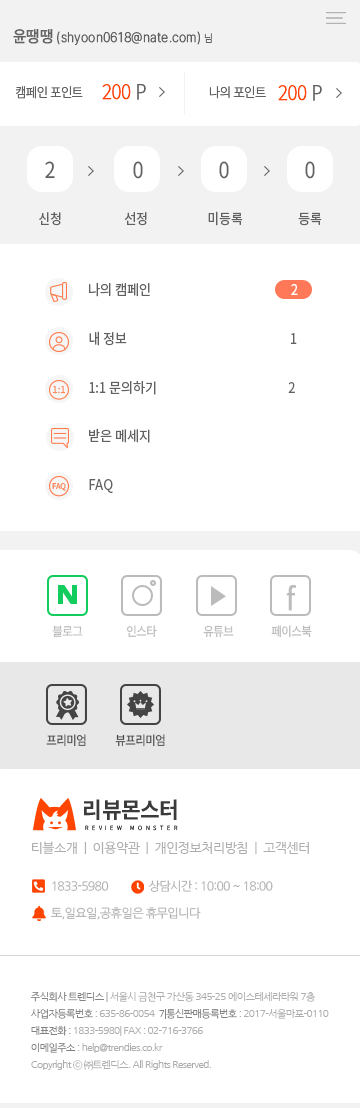
<style>
.page{position:relative;width:360px;height:1108px;background:#ffffff}
.page>*{position:absolute;margin:0}
.t1{font:13.8px "Pretendard-ExtraLight";letter-spacing:0.02em;color:#616161;font-weight:bold;scale:0.91 1}
.t2{font:16.5px "Pretendard-Medium";letter-spacing:0.02em;color:#616161;font-weight:bold;scale:0.91 1}
.t3{font:11px "Pretendard-ExtraLight";letter-spacing:0.02em;color:#616161;font-weight:bold;scale:0.91 1}
.t4{font:13.2px "NotoSansKR-Thin";letter-spacing:-0.04em;color:#616161;font-weight:bold;scale:0.91 1}
.t5{font:20.4px "NotoSansKR-Thin";letter-spacing:-0.04em;color:#ff4500;font-weight:bold;scale:0.91 1}
.t6{font:20.4px "NotoSansKR-Thin";letter-spacing:-0.04em;color:#616161;font-weight:bold;scale:0.91 1}
.t7{font:22px "NotoSansKR-Regular";color:#616161;scale:0.91 1}
.t8{font:14.3px "NotoSansKR-Regular";color:#616161;scale:0.91 1}
.t9{font:14.3px/48.7px "NotoSansKR-Regular";color:#616161;scale:0.91 1}
.t10{font:14.3px/48.7px "NotoSansKR-Regular";color:#ffffff;scale:0.91 1}
.t11{font:30.6px "NotoSansKR-Regular";letter-spacing:-0.02em;color:#bbbbbb;font-weight:bold;scale:0.91 1}
.t12{font:12.6px "NotoSansKR-Regular";letter-spacing:-0.05em;color:#bbbbbb;scale:0.91 1}
.t13{font:12.6px "NotoSansKR-Regular";letter-spacing:-0.05em;color:#444444;scale:0.91 1}
.t14{font:13px "NanumGothic";letter-spacing:-0.04em;color:#aeaeae}
.t15{font:12.3px/13.9px "NanumGothic";letter-spacing:-0.06em;color:#aeaeae}
.t16{font:10px/17px "NanumGothic";letter-spacing:-0.06em;color:#aeaeae}
.t17{font:10px/17px "NanumGothic";letter-spacing:-0.06em;color:#838282}
.t18{font:10px/17px "NanumGothic";letter-spacing:-0.06em;color:#929292}
.t19{font:10px/17px "NanumGothic";letter-spacing:-0.06em;color:#828282}
</style>
<div class="page">
<p class="t1" style="left:13px;top:29px;width:199px;height:16px"><span class="t2">윤땡땡</span> (shyoon0618@nate.com) <span class="t3">님</span></p>
<p class="t4" style="left:15px;top:86px;width:68px;height:13px">캠페인 포인트</p>
<p class="t5" style="left:102px;top:84px;width:29px;height:16px">200</p>
<p class="t6" style="left:137px;top:84px;width:9px;height:16px">P</p>
<p class="t4" style="left:209px;top:86px;width:57px;height:13px">나의 포인트</p>
<p class="t5" style="left:278px;top:85px;width:29px;height:16px">200</p>
<p class="t6" style="left:313px;top:85px;width:9px;height:16px">P</p>
<p class="t7" style="left:45px;top:161px;width:10px;height:18px">2</p>
<p class="t7" style="left:133px;top:161px;width:10px;height:18px">0</p>
<p class="t7" style="left:219px;top:161px;width:10px;height:18px">0</p>
<p class="t7" style="left:305px;top:161px;width:10px;height:18px">0</p>
<p class="t8" style="left:39px;top:212px;width:22px;height:14px">신청</p>
<p class="t8" style="left:124px;top:212px;width:23px;height:14px">선정</p>
<p class="t8" style="left:208px;top:211px;width:35px;height:15px">미등록</p>
<p class="t8" style="left:298px;top:212px;width:24px;height:14px">등록</p>
<p class="t9" style="left:89px;top:282px;width:209px;height:211px">나의 캠페인                                                <span class="t10">2<br></span>내 정보                                                        1<br>1:1 문의하기                                             2<br>받은 메세지<br>FAQ</p>
<p class="t11" style="left:286px;top:585px;width:11px;height:26px">f</p>
<p class="t12" style="left:52px;top:625px;width:31px;height:12px">블로그</p>
<p class="t12" style="left:126px;top:625px;width:31px;height:13px">인스타</p>
<p class="t12" style="left:203px;top:625px;width:31px;height:13px">유튜브</p>
<p class="t12" style="left:271px;top:625px;width:41px;height:13px">페이스북</p>
<p class="t13" style="left:46px;top:734px;width:40px;height:13px">프리미엄</p>
<p class="t13" style="left:115px;top:734px;width:50px;height:13px">뷰프리미엄</p>
<p class="t14" style="left:32px;top:841px;width:277px;height:13px">티블소개  |  이용약관  |  개인정보처리방침  |  고객센터</p>
<p class="t15" style="left:50px;top:880px;width:223px;height:40px">1833-5980               상담시간 : 10:00 ~ 18:00<br><br> 토,일요일,공휴일은 휴무입니다</p>
<p class="t16" style="left:30px;top:992px;width:299px;height:78px"><span class="t17">주식회사 트렌디스</span><span class="t18"> |</span> 서울시 금천구 가산동 345-25 에이스테세라타워 7층<br><span class="t19">사업자등록번호 </span>: 635-86-0054  <span class="t19">7|통신판매등록번호 </span>: 2017-서울마포-0110<br><span class="t19">대표전화 : </span>1833-5980| FAX : 02-716-3766<br><span class="t19">이메일주소 </span>: help@trendies.co.kr<br>Copyright ⓒ ㈜트렌디스. All Rights Reserved.</p>
</div>
